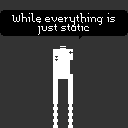
<style>
.page{position:relative;width:128px;height:128px;background:#333333}
.page>*{position:absolute;margin:0}
.t1{font:8px "Memoria";color:#ffffff}
</style>
<div class="page">
<p class="t1" style="left:12px;top:13px;width:103px;height:22px;text-align:center">While everything is<br>just static</p>
</div>
